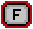
<style>
.page{position:relative;width:33px;height:29px;background:#c4c4c4}
.page>*{position:absolute;margin:0}
.t1{font:16px "Barlow-Bold";color:#000000}
</style>
<div class="page">
<p class="t1" style="left:13px;top:9px;width:8px;height:11px">F</p>
</div>
